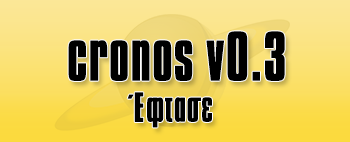
<style>
.page{position:relative;width:350px;height:142px}
.page>*{position:absolute;margin:0}
.t1{font:60px "Aka-AcidGR-Compacta";color:#000000;font-weight:bold}
.t2{font:36px "Aka-AcidGR-Compacta";color:#000000;font-weight:bold}
</style>
<div class="page">
<p class="t1" style="left:68px;top:31px;width:217px;height:50px">cronos v0.3</p>
<p class="t2" style="left:127px;top:92px;width:85px;height:36px">Έφτασε</p>
</div>
